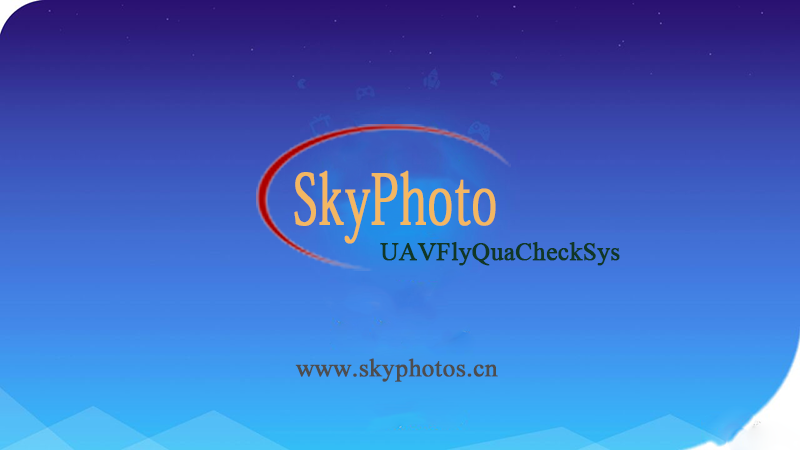
<style>
.page{position:relative;width:800px;height:450px}
.page>*{position:absolute;margin:0}
.t1{font:69px "AdobeKaitiStd-Regular";color:#f3b762;font-weight:bold;scale:0.67 1}
.t2{font:25px "TimesNewRomanPSMT";color:#113725;font-weight:bold}
.t3{font:25px "TimesNewRomanPSMT";color:#4d4d4d;font-weight:bold}
</style>
<div class="page">
<p class="t1" style="left:294px;top:170px;width:202px;height:74px">SkyPhoto</p>
<p class="t2" style="left:380px;top:242px;width:240px;height:24px">UAVFlyQuaCheckSys</p>
<p class="t3" style="left:295px;top:358px;width:203px;height:24px">www.skyphotos.cn</p>
</div>
